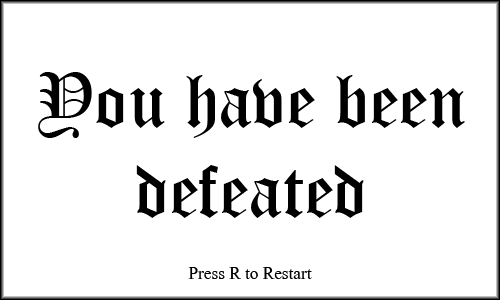
<style>
.page{position:relative;width:500px;height:300px;background:#ffffff}
.page>*{position:absolute;margin:0}
.t1{font:75px "OldEnglishTextMT";color:#000000}
.t2{font:20.8px "ShonarBangla";color:#000000}
</style>
<div class="page">
<p class="t1" style="left:38px;top:72px;width:427px;height:146px;text-align:center">You have been<br>defeated</p>
<p class="t2" style="left:188px;top:267px;width:124px;height:12px">Press R to Restart</p>
</div>
